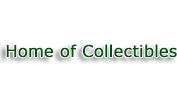
<style>
.page{position:relative;width:177px;height:100px;background:#ffffff}
.page>*{position:absolute;margin:0}
.t1{font:16px "Verdana";color:#015209;font-weight:bold}
</style>
<div class="page">
<p class="t1" style="left:6px;top:44px;width:171px;height:14px">Home of Collectibles</p>
</div>
